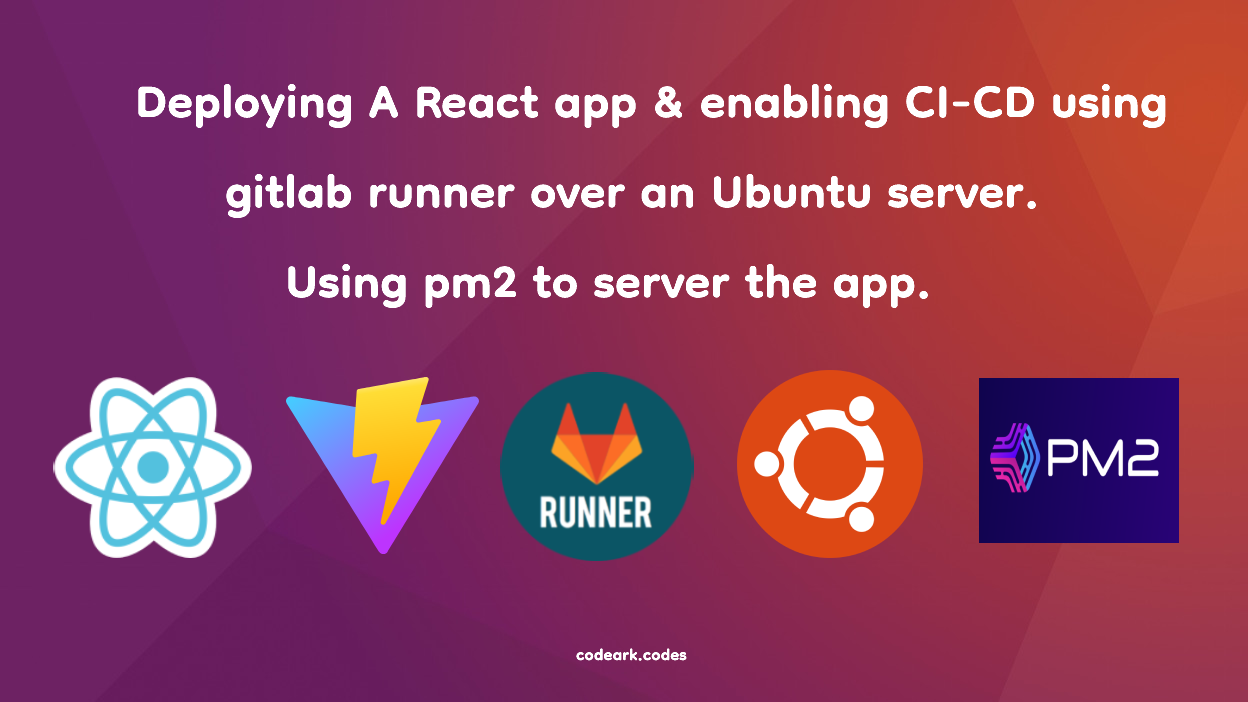
<style>
.page{position:relative;width:1248px;height:702px}
.page>*{position:absolute;margin:0}
.t1{font:75px "Dongle-Bold";color:#ffffff}
.t2{font:26px "Dongle-Bold";color:#ffffff}
</style>
<div class="page">
<p class="t1" style="left:138px;top:84px;width:1028px;height:224px">Deploying A React app &amp; enabling CI-CD using <br>      gitlab runner over an Ubuntu server. <br>          Using pm2 to server the app.</p>
<p class="t2" style="left:576px;top:648px;width:111px;height:13px">codeark.codes</p>
</div>
